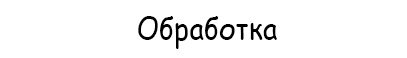
<style>
.page{position:relative;width:407px;height:58px;background:#ffffff}
.page>*{position:absolute;margin:0}
.t1{font:31.9px "ComicSansMS";color:#000000;scale:0.89 1}
</style>
<div class="page">
<p class="t1" style="left:138px;top:16px;width:139px;height:33px">Обработка</p>
</div>
